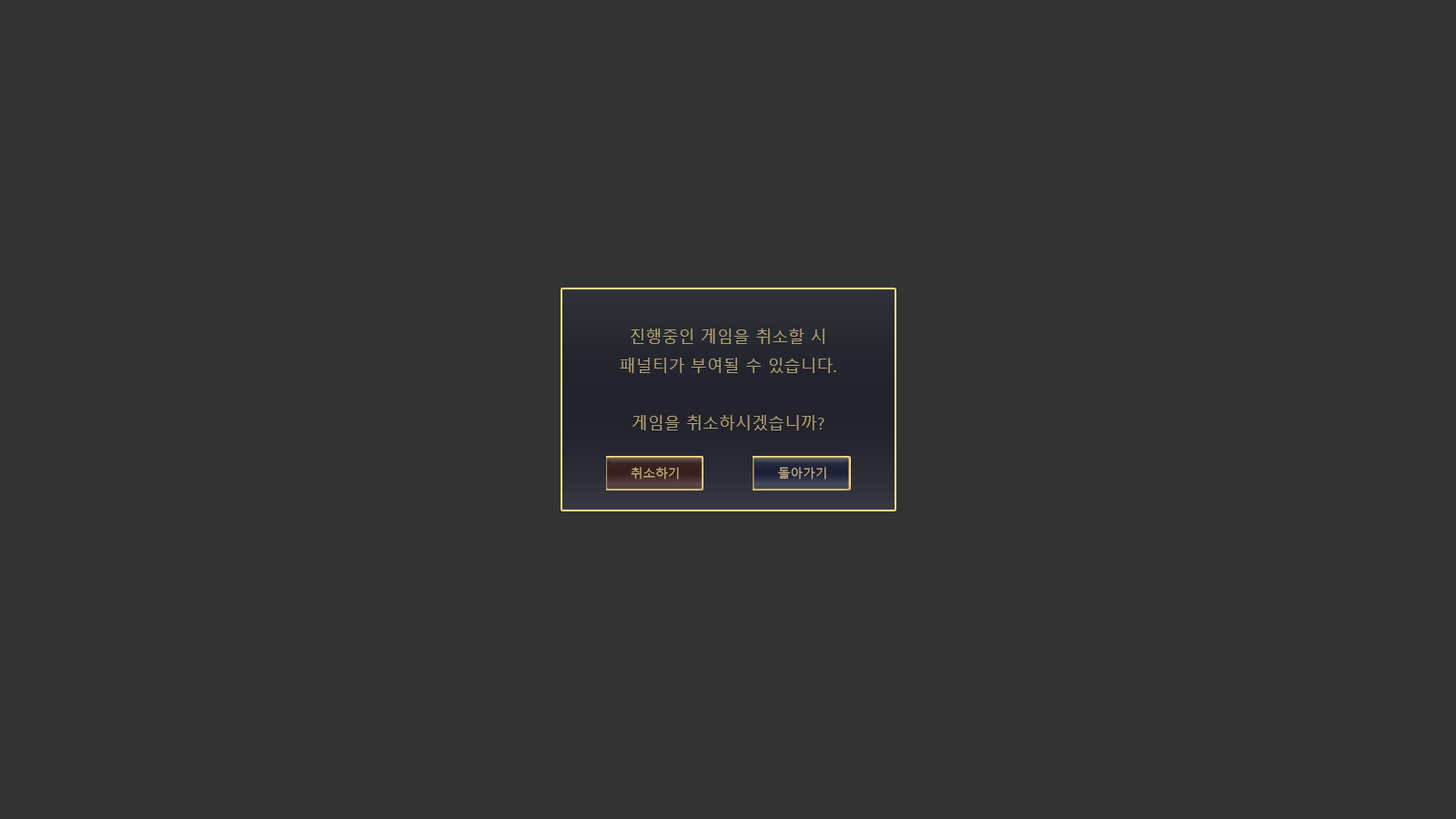
<style>
.page{position:relative;width:1456px;height:819px;background:#333333}
.page>*{position:absolute;margin:0}
.t1{font:16.4px "MalgunGothic";color:#b1a071}
.t2{font:12.3px "MalgunGothic";color:#c8b27a}
.t3{font:12.3px "MalgunGothic";color:#c5b27e}
</style>
<div class="page">
<p class="t1" style="left:620px;top:329px;width:216px;height:101px;text-align:center">진행중인 게임을 취소할 시<br>패널티가 부여될 수 있습니다.<br><br>게임을 취소하시겠습니까?</p>
<p class="t2" style="left:631px;top:467px;width:48px;height:13px">취소하기</p>
<p class="t3" style="left:778px;top:467px;width:48px;height:13px">돌아가기</p>
</div>
